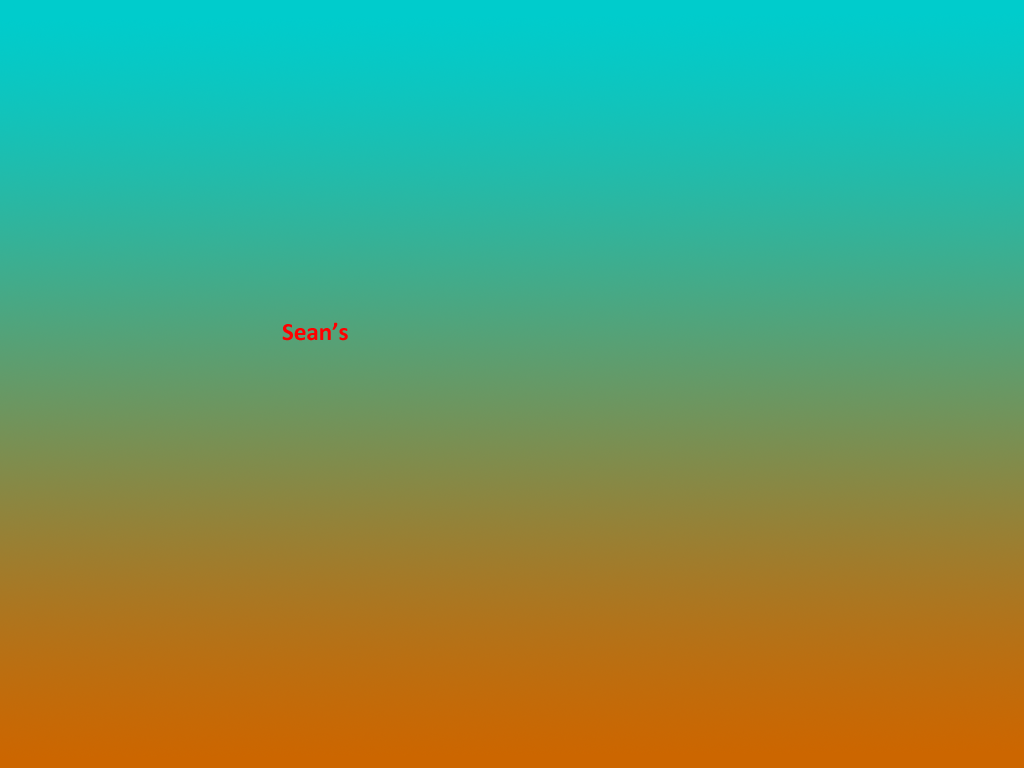
<style>
.page{position:relative;width:1024px;height:768px}
.page>*{position:absolute;margin:0}
.t1{font:25px "Calibri-Bold";color:#ff0000}
</style>
<div class="page">
<p class="t1" style="left:282px;top:322px;width:66px;height:19px">Sean’s</p>
</div>
